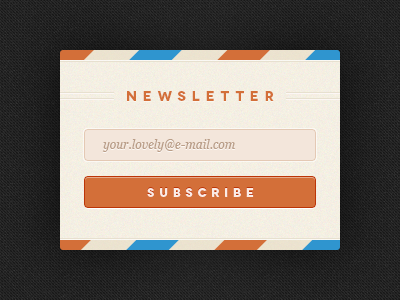
<style>
.page{position:relative;width:400px;height:300px}
.page>*{position:absolute;margin:0}
.t1{font:14px "Novecentowide-Bold";letter-spacing:0.4em;color:#d36f39}
.t2{font:12px "Georgia-Italic";color:#ba9e88}
.t3{font:12px "Novecentowide-Bold";letter-spacing:0.4em;color:#fbece6;text-transform:uppercase}
</style>
<div class="page">
<p class="t1" style="left:127px;top:91px;width:147px;height:10px">Newsletter</p>
<p class="t2" style="left:102px;top:139px;width:134px;height:13px">your.lovely@e-mail.com</p>
<p class="t3" style="left:147px;top:188px;width:107px;height:9px">subscribe</p>
</div>
